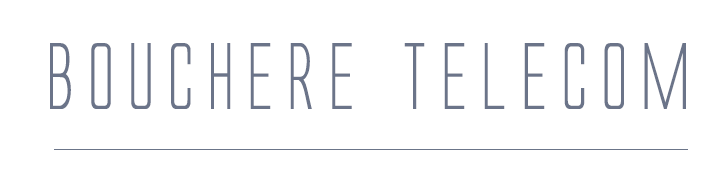
<style>
.page{position:relative;width:717px;height:194px;background:#ffffff}
.page>*{position:absolute;margin:0}
.t1{font:150px "AlienLeague";color:#6b7489}
</style>
<div class="page">
<p class="t1" style="left:50px;top:43px;width:636px;height:66px">BOUCHERE TELECOM</p>
</div>
